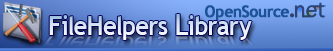
<style>
.page{position:relative;width:333px;height:51px}
.page>*{position:absolute;margin:0}
.t1{font:16px "TrebuchetMS-Bold";letter-spacing:-0.025em;color:#1c5396;font-weight:bold;scale:0.95 1}
.t2{font:26.2px "TrebuchetMS-Bold";letter-spacing:-0.01em;color:#dae7f3;scale:0.9 1}
.t3{font:27.5px "TrebuchetMS-Bold";letter-spacing:-0.01em;color:#dae7f3;scale:0.9 1}
.t4{font:28.8px "TrebuchetMS-Bold";letter-spacing:-0.01em;color:#dae7f3;scale:0.9 1}
</style>
<div class="page">
<p class="t1" style="left:205px;top:5px;width:84px;height:16px">OpenSource</p>
<p class="t2" style="left:49px;top:14px;width:203px;height:26px"><span class="t3">F</span>ile<span class="t3">H</span>elpers <span class="t4">L</span><span class="t3">i</span>brary</p>
</div>
